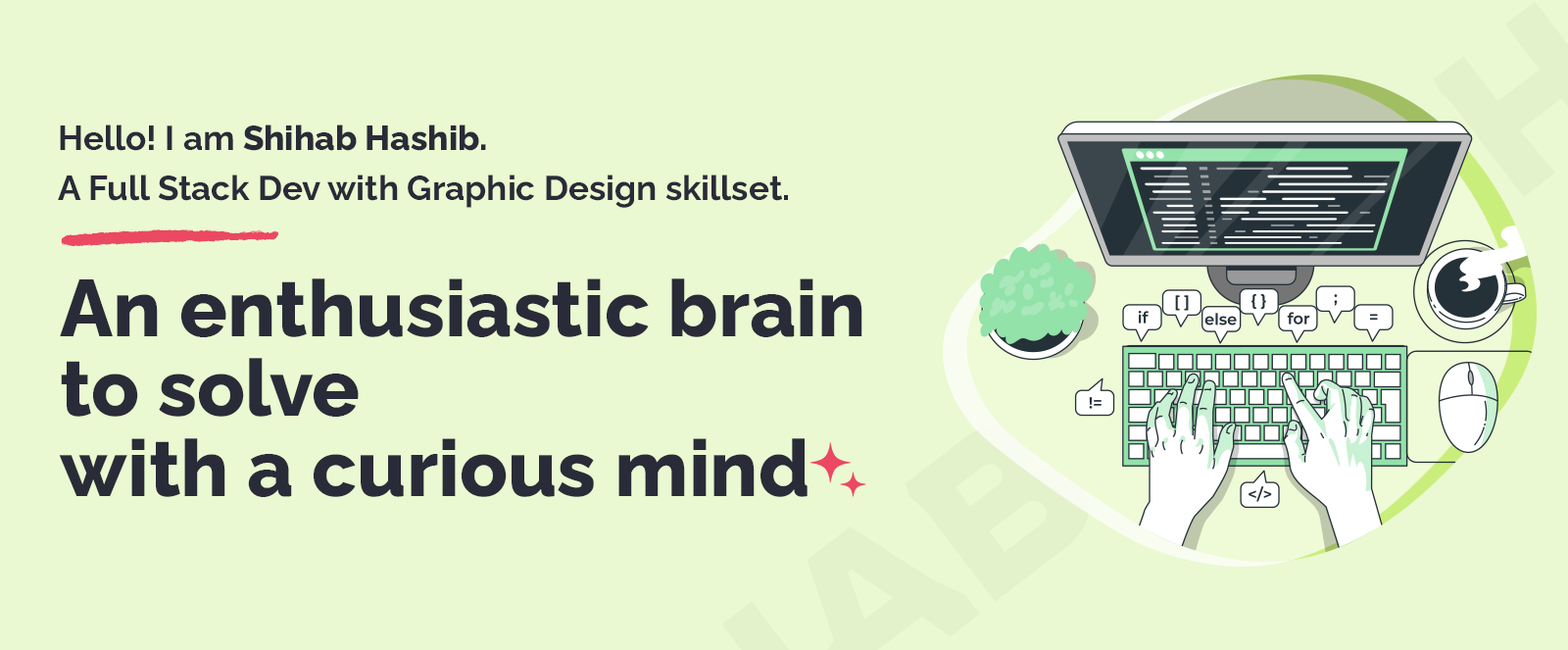
<style>
.page{position:relative;width:1568px;height:650px;background:#eaf9d1}
.page>*{position:absolute;margin:0}
.t1{font:34.3px/50px "Raleway-Bold";color:#292b38}
.t2{font:34.3px/50px "Raleway-ExtraBold";color:#292b38}
.t3{font:79px/79.7px "Raleway-ExtraBold";color:#292b38}
</style>
<div class="page">
<p class="t1" style="left:58px;top:124px;width:730px;height:84px">Hello! I am<span class="t2"> Shihab Hashib.<br></span>A Full Stack Dev with Graphic Design skillset.</p>
<p class="t3" style="left:59px;top:278px;width:803px;height:219px">An enthusiastic brain to solve <br>with a curious mind</p>
</div>
